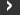
<style>
.page{position:relative;width:20px;height:15px;background:#333333}
.page>*{position:absolute;margin:0}
.t1{font:12px "Seoul-Headline";color:#ffffff}
</style>
<div class="page">
<p class="t1" style="left:7px;top:0px;width:5px;height:11px">&gt;</p>
</div>
